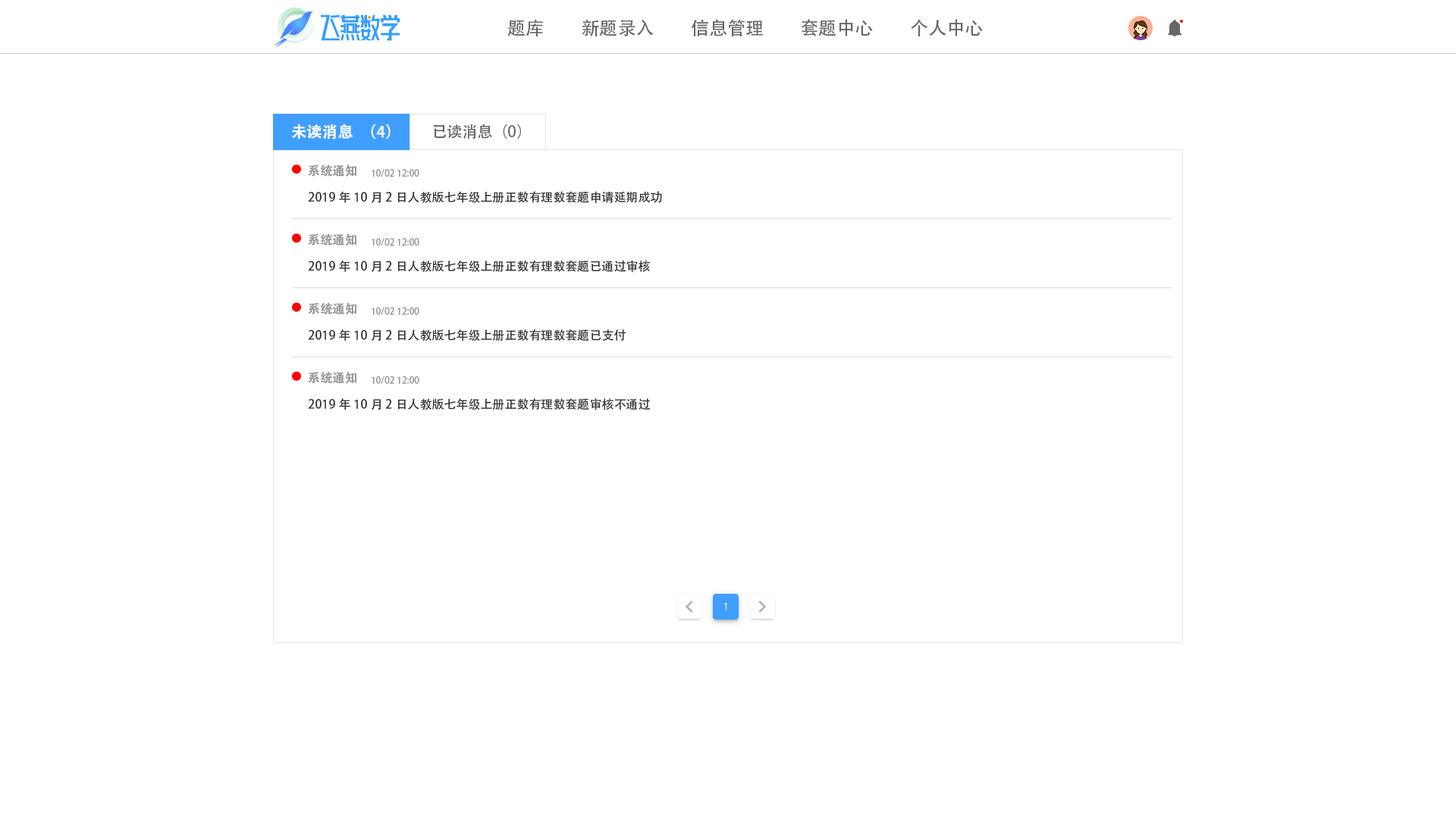
<style>
.page{position:relative;width:1456px;height:819px;background:#ffffff}
.page>*{position:absolute;margin:0}
.t1{font:18.2px "AdobeHeitiStd-Regular";color:#666666}
.t2{font:15.2px "AdobeHeitiStd-Regular";color:#ffffff;font-weight:bold}
.t3{font:15.2px "AdobeHeitiStd-Regular";color:#666666}
.t4{font:12.1px "AdobeHeitiStd-Regular";color:#999999;font-weight:bold}
.t5{font:9.1px "AdobeHeitiStd-Regular";color:#999999}
.t6{font:12.1px "AdobeHeitiStd-Regular";color:#333333}
</style>
<div class="page">
<p class="t1" style="left:507px;top:20px;width:36px;height:16px">题库</p>
<p class="t1" style="left:582px;top:20px;width:72px;height:16px">新题录入</p>
<p class="t1" style="left:691px;top:19px;width:72px;height:18px">信息管理</p>
<p class="t1" style="left:802px;top:19px;width:71px;height:17px">套题中心</p>
<p class="t1" style="left:911px;top:19px;width:72px;height:17px">个人中心</p>
<p class="t2" style="left:292px;top:124px;width:99px;height:16px">未读消息（4）</p>
<p class="t3" style="left:434px;top:124px;width:87px;height:15px">已读消息（0）</p>
<p class="t4" style="left:308px;top:165px;width:49px;height:12px">系统通知</p>
<p class="t5" style="left:372px;top:169px;width:47px;height:8px">10/02 12:00</p>
<p class="t6" style="left:308px;top:191px;width:354px;height:12px">2019年10月2日人教版七年级上册正数有理数套题申请延期成功</p>
<p class="t4" style="left:308px;top:234px;width:49px;height:12px">系统通知</p>
<p class="t5" style="left:372px;top:238px;width:47px;height:8px">10/02 12:00</p>
<p class="t6" style="left:308px;top:260px;width:342px;height:12px">2019年10月2日人教版七年级上册正数有理数套题已通过审核</p>
<p class="t4" style="left:308px;top:303px;width:49px;height:12px">系统通知</p>
<p class="t5" style="left:372px;top:307px;width:47px;height:8px">10/02 12:00</p>
<p class="t6" style="left:308px;top:329px;width:318px;height:12px">2019年10月2日人教版七年级上册正数有理数套题已支付</p>
<p class="t4" style="left:308px;top:372px;width:49px;height:12px">系统通知</p>
<p class="t5" style="left:372px;top:376px;width:47px;height:8px">10/02 12:00</p>
<p class="t6" style="left:308px;top:398px;width:343px;height:12px">2019年10月2日人教版七年级上册正数有理数套题审核不通过</p>
</div>
